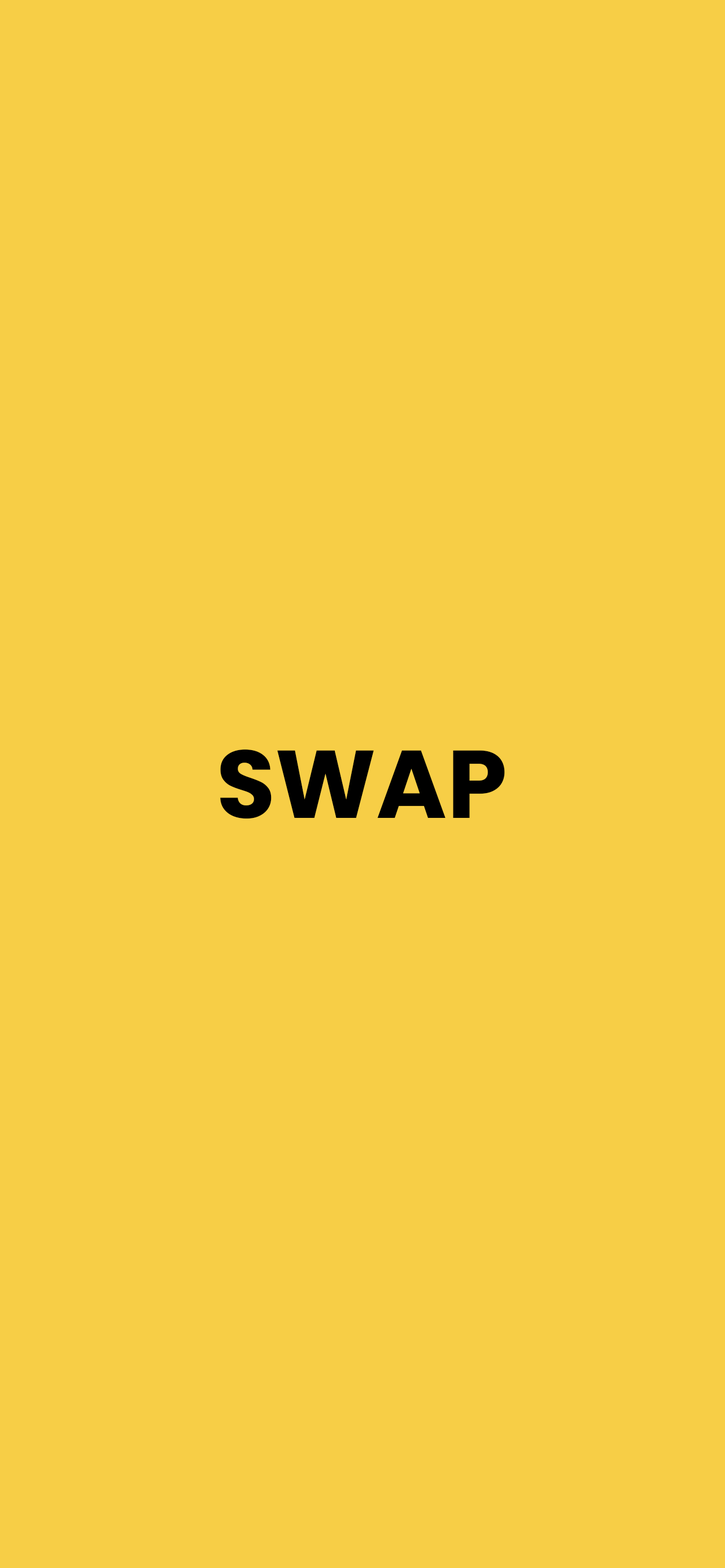
<style>
.page{position:relative;width:725px;height:1568px;background:#f7ce46}
.page>*{position:absolute;margin:0}
.t1{font:96px "Poppins-Bold";color:#000000}
</style>
<div class="page">
<p class="t1" style="left:220px;top:749px;width:285px;height:70px">SWAP</p>
</div>
